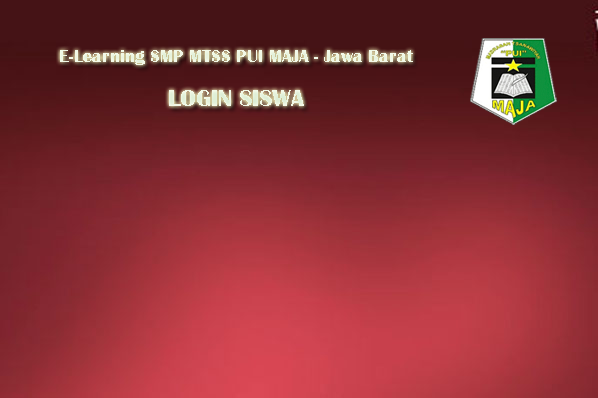
<style>
.page{position:relative;width:598px;height:398px}
.page>*{position:absolute;margin:0}
.t1{font:18px "BritannicBold";color:#f2f9e7}
.t2{font:24px "BritannicBold";color:#eaf5e0}
</style>
<div class="page">
<p class="t1" style="left:60px;top:50px;width:353px;height:15px">E-Learning SMP MTSS PUI MAJA - Jawa Barat</p>
<p class="t2" style="left:169px;top:90px;width:135px;height:16px">LOGIN SISWA</p>
</div>
